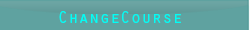
<style>
.page{position:relative;width:250px;height:30px;background:#5fa2a0}
.page>*{position:absolute;margin:0}
.t1{font:16.7px "OratorStd";color:#00fef6;scale:1.04 1}
</style>
<div class="page">
<p class="t1" style="left:59px;top:11px;width:122px;height:12px">ChangeCourse</p>
</div>
